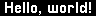
<style>
.page{position:relative;width:96px;height:16px;background:#000000}
.page>*{position:absolute;margin:0}
.t1{font:16px "Pixellari";color:#ffffff}
</style>
<div class="page">
<p class="t1" style="left:5px;top:2px;width:86px;height:13px">Hello, world!</p>
</div>
